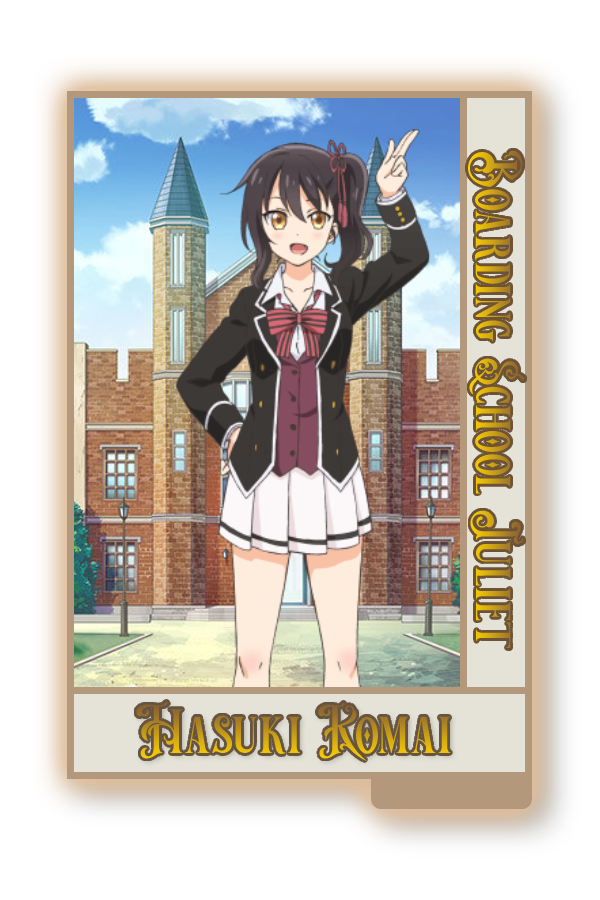
<style>
.page{position:relative;width:600px;height:900px;background:#ffffff}
.page>*{position:absolute;margin:0}
.t1{font:58.9px "VictorianDecadeDemoVersion"}
.t2{font:62.3px "VictorianDecadeDemoVersion"}
</style>
<div class="page">
<p class="t1" style="left:468px;top:150px;width:57px;height:498px;rotate:90deg">Boarding School Juliet</p>
<p class="t2" style="left:136px;top:701px;width:315px;height:61px">Hasuki Komai</p>
</div>
